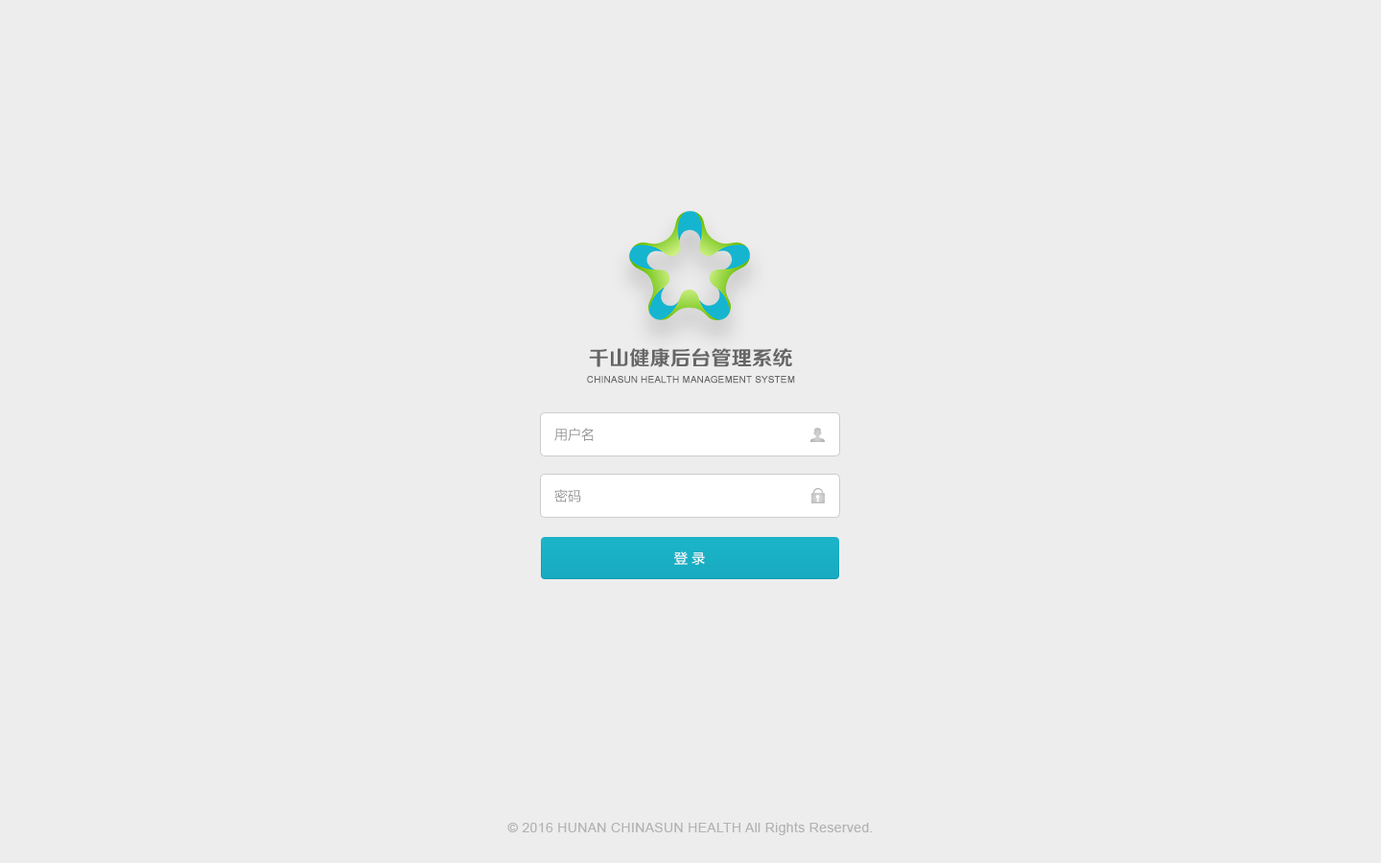
<style>
.page{position:relative;width:1381px;height:863px;background:#ededed}
.page>*{position:absolute;margin:0}
.t1{font:20.1px "FZZZHONGJW--GB1-0";color:#666666}
.t2{font:9.3px "ArialMT";color:#666666;font-weight:bold}
.t3{font:13.4px "MicrosoftYaHei";color:#999999}
.t4{font:13.4px "MicrosoftYaHei";color:#ffffff}
.t5{font:13.4px "ArialMT";letter-spacing:0.025em;color:#b3b3b3}
</style>
<div class="page">
<p class="t1" style="left:589px;top:348px;width:203px;height:19px">千山健康后台管理系统</p>
<p class="t2" style="left:587px;top:376px;width:208px;height:8px">CHINASUN HEALTH MANAGEMENT SYSTEM</p>
<p class="t3" style="left:554px;top:428px;width:40px;height:13px">用户名</p>
<p class="t3" style="left:554px;top:489px;width:27px;height:14px">密码</p>
<p class="t4" style="left:674px;top:552px;width:31px;height:13px">登 录</p>
<p class="t5" style="left:507px;top:822px;width:366px;height:13px">© 2016 HUNAN CHINASUN HEALTH All Rights Reserved.</p>
</div>
